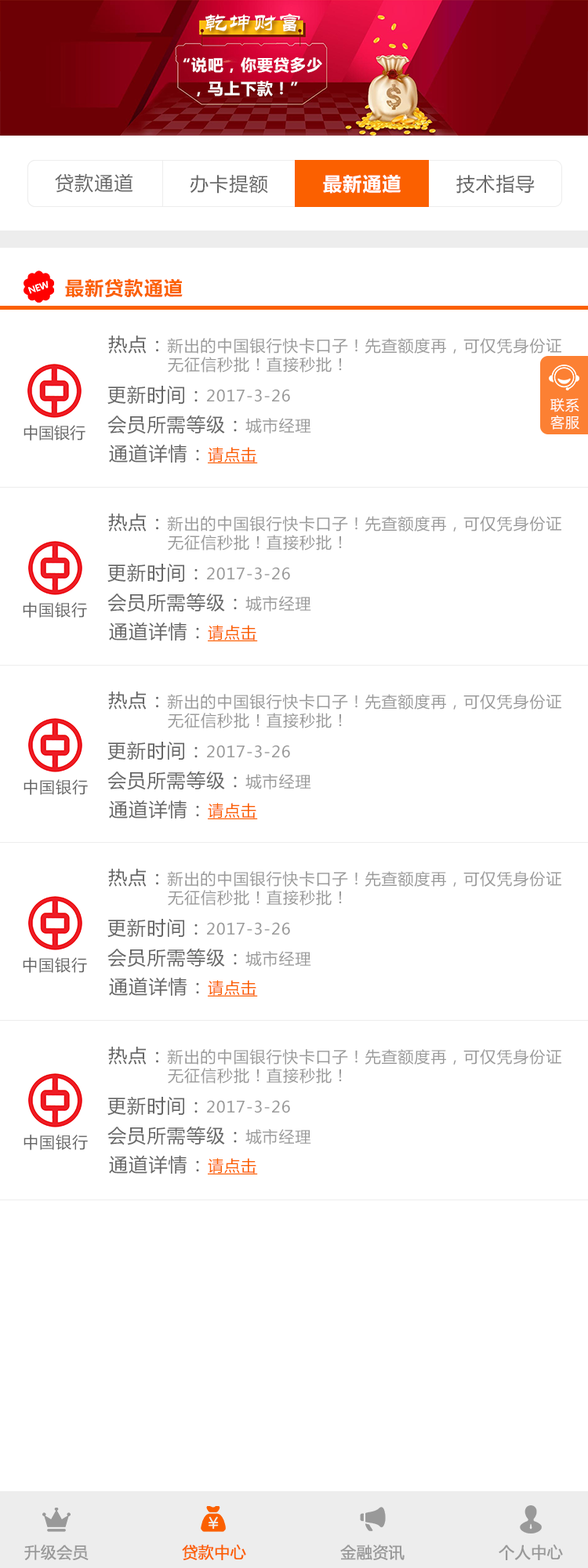
<style>
.page{position:relative;width:588px;height:1568px;background:#ffffff}
.page>*{position:absolute;margin:0}
.t1{font:23.5px "STLiti";letter-spacing:0.05em;color:#ffffff}
.t2{font:15.7px/23.5px "MicrosoftYaHei-Bold";letter-spacing:0.05em;color:#ffffff}
.t3{font:18.8px "MicrosoftYaHei";letter-spacing:0.05em;color:#666666}
.t4{font:18.8px "MicrosoftYaHei-Bold";letter-spacing:0.05em;color:#ffffff}
.t5{font:18.8px "MicrosoftYaHei-Bold";letter-spacing:0.05em;color:#fb6000}
.t6{font:15.7px "MicrosoftYaHei";letter-spacing:0.05em;color:#999999}
.t7{font:14.1px "MicrosoftYaHei";letter-spacing:0.05em;color:#ffffff}
.t8{font:15.7px "MicrosoftYaHei";color:#666666}
.t9{font:15.7px "MicrosoftYaHei";letter-spacing:0.05em;color:#fb6000;text-decoration:underline}
.t10{font:15.7px "MicrosoftYaHei";letter-spacing:0.05em;color:#666666}
.t11{font:15.7px "MicrosoftYaHei";color:#999999;font-weight:bold}
.t12{font:15.7px "MicrosoftYaHei";color:#fb6000;font-weight:bold}
</style>
<div class="page">
<p class="t1" style="left:205px;top:13px;width:95px;height:18px">乾坤财富</p>
<p class="t2" style="left:183px;top:57px;width:139px;height:39px;text-align:center">“说吧，你要贷多少<br>，马上下款！”</p>
<p class="t3" style="left:55px;top:173px;width:78px;height:20px">贷款通道</p>
<p class="t3" style="left:190px;top:175px;width:78px;height:19px">办卡提额</p>
<p class="t4" style="left:323px;top:174px;width:78px;height:20px">最新通道</p>
<p class="t3" style="left:456px;top:175px;width:79px;height:19px">技术指导</p>
<p class="t5" style="left:65px;top:278px;width:118px;height:20px">最新贷款通道</p>
<p class="t6" style="left:108px;top:336px;width:453px;height:36px"><span class="t3">热点：</span>新出的中国银行快卡口子！先查额度再，可仅凭身份证<br>           无征信秒批！直接秒批！</p>
<p class="t6" style="left:107px;top:385px;width:183px;height:20px"><span class="t3">更新时间：</span>2017-3-26</p>
<p class="t7" style="left:550px;top:398px;width:29px;height:32px">联系<br>客服</p>
<p class="t8" style="left:24px;top:425px;width:61px;height:16px">中国银行</p>
<p class="t3" style="left:107px;top:416px;width:204px;height:18px">会员所需等级：<span class="t6">城市经理</span></p>
<p class="t3" style="left:109px;top:444px;width:149px;height:19px">通道详情：<span class="t9">请点击</span></p>
<p class="t6" style="left:108px;top:514px;width:453px;height:36px"><span class="t3">热点：</span>新出的中国银行快卡口子！先查额度再，可仅凭身份证<br>           无征信秒批！直接秒批！</p>
<p class="t6" style="left:107px;top:563px;width:183px;height:20px"><span class="t3">更新时间：</span>2017-3-26</p>
<p class="t3" style="left:107px;top:593px;width:204px;height:19px">会员所需等级：<span class="t6">城市经理</span></p>
<p class="t10" style="left:23px;top:602px;width:64px;height:16px">中国银行</p>
<p class="t3" style="left:109px;top:622px;width:149px;height:19px">通道详情：<span class="t9">请点击</span></p>
<p class="t6" style="left:108px;top:691px;width:453px;height:37px"><span class="t3">热点：</span>新出的中国银行快卡口子！先查额度再，可仅凭身份证<br>           无征信秒批！直接秒批！</p>
<p class="t6" style="left:107px;top:741px;width:183px;height:19px"><span class="t3">更新时间：</span>2017-3-26</p>
<p class="t3" style="left:107px;top:771px;width:204px;height:19px">会员所需等级：<span class="t6">城市经理</span></p>
<p class="t10" style="left:24px;top:779px;width:64px;height:16px">中国银行</p>
<p class="t3" style="left:109px;top:800px;width:149px;height:19px">通道详情：<span class="t9">请点击</span></p>
<p class="t6" style="left:108px;top:869px;width:453px;height:37px"><span class="t3">热点：</span>新出的中国银行快卡口子！先查额度再，可仅凭身份证<br>           无征信秒批！直接秒批！</p>
<p class="t6" style="left:107px;top:918px;width:183px;height:20px"><span class="t3">更新时间：</span>2017-3-26</p>
<p class="t3" style="left:107px;top:949px;width:204px;height:18px">会员所需等级：<span class="t6">城市经理</span></p>
<p class="t10" style="left:23px;top:957px;width:64px;height:16px">中国银行</p>
<p class="t3" style="left:109px;top:977px;width:149px;height:19px">通道详情：<span class="t9">请点击</span></p>
<p class="t6" style="left:108px;top:1047px;width:453px;height:36px"><span class="t3">热点：</span>新出的中国银行快卡口子！先查额度再，可仅凭身份证<br>           无征信秒批！直接秒批！</p>
<p class="t6" style="left:107px;top:1096px;width:183px;height:20px"><span class="t3">更新时间：</span>2017-3-26</p>
<p class="t3" style="left:107px;top:1127px;width:204px;height:18px">会员所需等级：<span class="t6">城市经理</span></p>
<p class="t10" style="left:24px;top:1134px;width:64px;height:16px">中国银行</p>
<p class="t3" style="left:109px;top:1155px;width:149px;height:19px">通道详情：<span class="t9">请点击</span></p>
<p class="t11" style="left:24px;top:1544px;width:65px;height:16px">升级会员</p>
<p class="t12" style="left:182px;top:1544px;width:64px;height:16px">贷款中心</p>
<p class="t11" style="left:340px;top:1544px;width:65px;height:16px">金融资讯</p>
<p class="t11" style="left:499px;top:1544px;width:64px;height:16px">个人中心</p>
</div>
